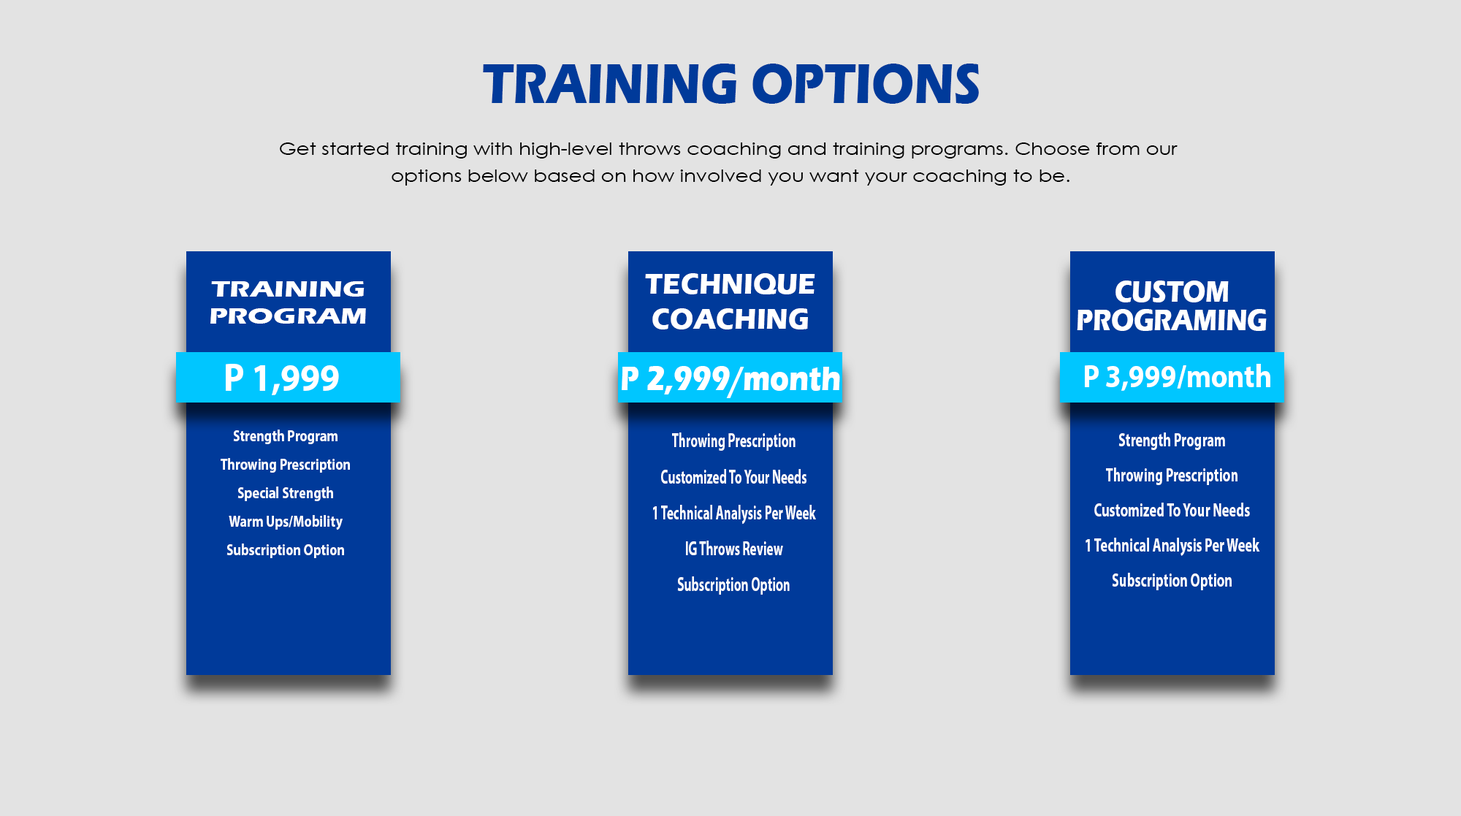
<style>
.page{position:relative;width:1461px;height:816px;background:#e3e3e3}
.page>*{position:absolute;margin:0}
.t1{font:58.2px "ErasITC-Bold";color:#003a9a;scale:0.84 1}
.t2{font:17.9px/27.3px "CenturyGothic";color:#000000;scale:1.13 1}
.t3{font:22.4px/26.6px "ErasITC-Bold";color:#ffffff;scale:1.31 1}
.t4{font:29.6px/35.2px "ErasITC-Bold";color:#ffffff;scale:0.92 1}
.t5{font:30.9px/28.9px "ErasITC-Bold";color:#ffffff;scale:0.84 1}
.t6{font:39px "MyriadPro-Bold";color:#ffffff;scale:0.92 1}
.t7{font:31.9px "MyriadPro-Bold";color:#ffffff;scale:0.9 1}
.t8{font:34.9px "ErasITC-Bold";color:#ffffff;scale:0.83 1}
.t9{font:15.6px/28.5px "MyriadPro-Bold";color:#ffffff;scale:0.84 1}
.t10{font:19.7px/36px "MyriadPro-Bold";color:#ffffff;scale:0.64 1}
.t11{font:19.3px/35.1px "MyriadPro-Bold";color:#ffffff;scale:0.7 1}
</style>
<div class="page">
<p class="t1" style="left:483px;top:64px;width:496px;height:40px">TRAINING OPTIONS</p>
<p class="t2" style="left:280px;top:142px;width:898px;height:44px;text-align:center">Get started training with high-level throws coaching and training programs. Choose from our <br>options below based on how involved you want your coaching to be.</p>
<p class="t3" style="left:210px;top:281px;width:156px;height:43px;text-align:center">TRAINING<br>PROGRAM</p>
<p class="t4" style="left:645px;top:273px;width:170px;height:56px;text-align:center">TECHNIQUE<br>COACHING</p>
<p class="t5" style="left:1077px;top:281px;width:190px;height:50px;text-align:center">CUSTOM<br>PROGRAMING</p>
<p class="t6" style="left:226px;top:364px;width:113px;height:31px">P 1,999</p>
<p class="t7" style="left:1085px;top:364px;width:186px;height:27px">P 3,999/month</p>
<p class="t8" style="left:622px;top:366px;width:218px;height:32px">P 2,999/month</p>
<p class="t9" style="left:221px;top:430px;width:129px;height:128px;text-align:center">Strength Program​<br>Throwing Prescription<br>Special Strength<br>Warm Ups/Mobility<br>Subscription Option</p>
<p class="t10" style="left:653px;top:433px;width:163px;height:162px;text-align:center">Throwing Prescription<br>Customized To Your Needs<br>1 Technical Analysis Per Week<br>IG Throws Review<br>Subscription Option</p>
<p class="t11" style="left:1086px;top:433px;width:174px;height:157px;text-align:center">Strength Program​<br>Throwing Prescription<br>Customized To Your Needs<br>1 Technical Analysis Per Week<br>Subscription Option</p>
</div>
